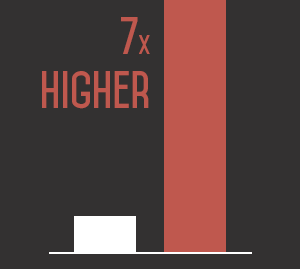
<style>
.page{position:relative;width:300px;height:269px;background:#333131}
.page>*{position:absolute;margin:0}
.t1{font:45px "Mohave-Bold";color:#bf584e}
.t2{font:22.5px "Mohave-Bold";color:#bf584e}
</style>
<div class="page">
<p class="t1" style="left:42px;top:17px;width:108px;height:92px">7<span class="t2">x<br></span>higher</p>
</div>
